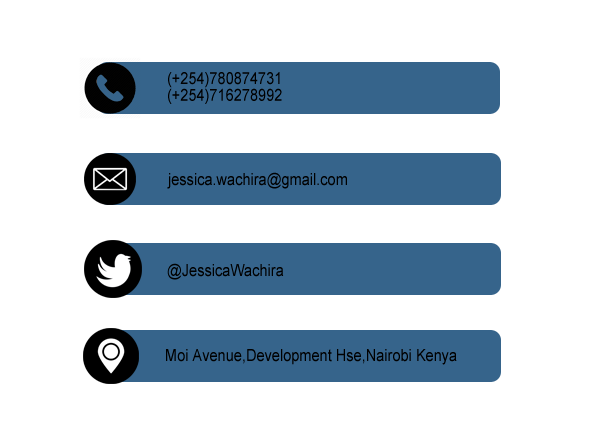
<style>
.page{position:relative;width:600px;height:430px;background:#ffffff}
.page>*{position:absolute;margin:0}
.t1{font:16.5px "ArialMT";color:#000000;scale:0.88 1}
</style>
<div class="page">
<p class="t1" style="left:168px;top:72px;width:114px;height:32px">(+254)780874731<br>(+254)716278992</p>
<p class="t1" style="left:167px;top:172px;width:180px;height:17px">jessica.wachira@gmail.com</p>
<p class="t1" style="left:167px;top:263px;width:117px;height:17px">@JessicaWachira</p>
<p class="t1" style="left:166px;top:349px;width:291px;height:16px">Moi Avenue,Development Hse,Nairobi Kenya</p>
</div>
